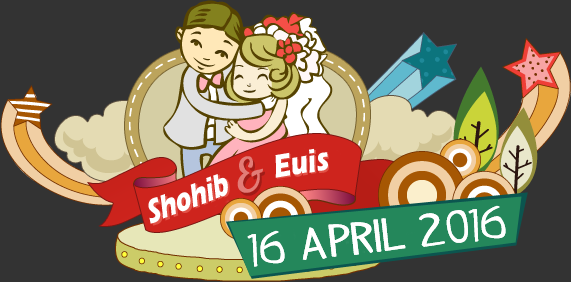
<style>
.page{position:relative;width:571px;height:282px;background:#333333}
.page>*{position:absolute;margin:0}
.t1{font:33.9px "ErasITC-Bold";color:#ffffff;scale:0.78 1}
.t2{font:33.9px "ErasITC-Bold";scale:0.77 1}
.t3{font:34.5px "ErasITC-Bold";color:#ffffff;scale:0.7 1}
.t4{font:34.4px "ErasITC-Bold";scale:0.71 1}
.t5{font:36px "IndyPimp";color:#ffffff;scale:1.36 1}
</style>
<div class="page">
<p class="t1" style="left:275px;top:148px;width:53px;height:30px;rotate:-10deg">Euis</p>
<p class="t2" style="left:276px;top:150px;width:53px;height:29px;rotate:-8deg">Euis</p>
<p class="t3" style="left:148px;top:174px;width:80px;height:50px;rotate:-21deg">Shohib</p>
<p class="t4" style="left:150px;top:174px;width:80px;height:52px;rotate:-22deg">Shohib</p>
<p class="t5" style="left:247px;top:205px;width:259px;height:62px;rotate:-6deg">16 APRIL 2016</p>
</div>
